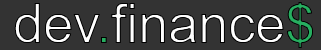
<style>
.page{position:relative;width:321px;height:50px;background:#333333}
.page>*{position:absolute;margin:0}
.t1{font:54.6px "ArialMT"}
</style>
<div class="page">
<p class="t1" style="left:14px;top:2px;width:299px;height:46px">dev.finance$</p>
</div>
